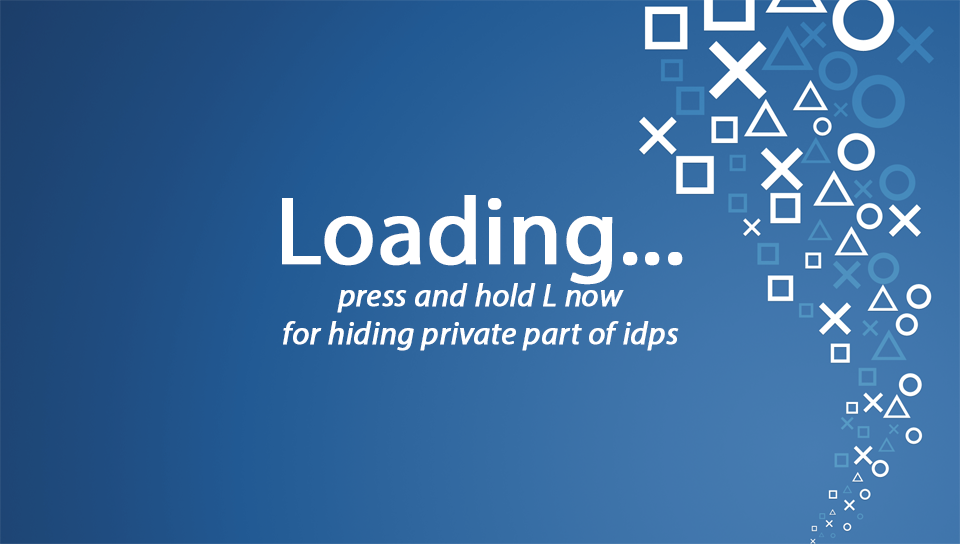
<style>
.page{position:relative;width:960px;height:544px}
.page>*{position:absolute;margin:0}
.t1{font:96px "MyriadPro-Regular";color:#ffffff;font-weight:bold}
.t2{font:32px "MyriadPro-It";color:#ffffff;font-weight:bold}
</style>
<div class="page">
<p class="t1" style="left:282px;top:195px;width:401px;height:90px">Loading...</p>
<p class="t2" style="left:283px;top:283px;width:396px;height:68px;text-align:center">press and hold L now<br>for hiding private part of idps</p>
</div>
